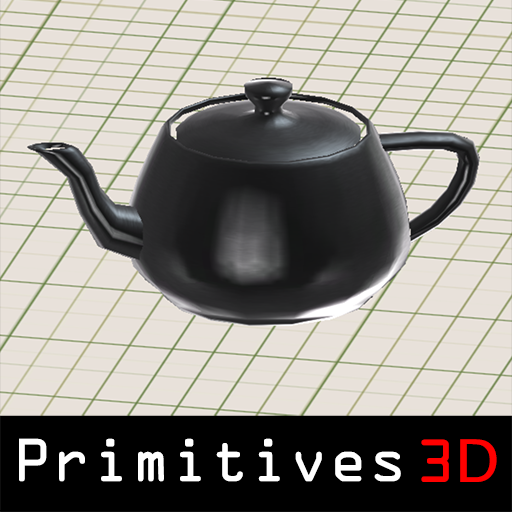
<style>
.page{position:relative;width:512px;height:512px;background:#e8e1da}
.page>*{position:absolute;margin:0}
.t1{font:54.3px "OCRAStd";color:#ffffff}
.t2{font:54.3px "OCRAStd";color:#ff0000}
.t3{font:58.8px "LucidaSansUnicode";color:#ff0000}
</style>
<div class="page">
<p class="t1" style="left:19px;top:438px;width:382px;height:44px">Primitives</p>
<p class="t2" style="left:421px;top:439px;width:76px;height:43px">3<span class="t3">D</span></p>
</div>
